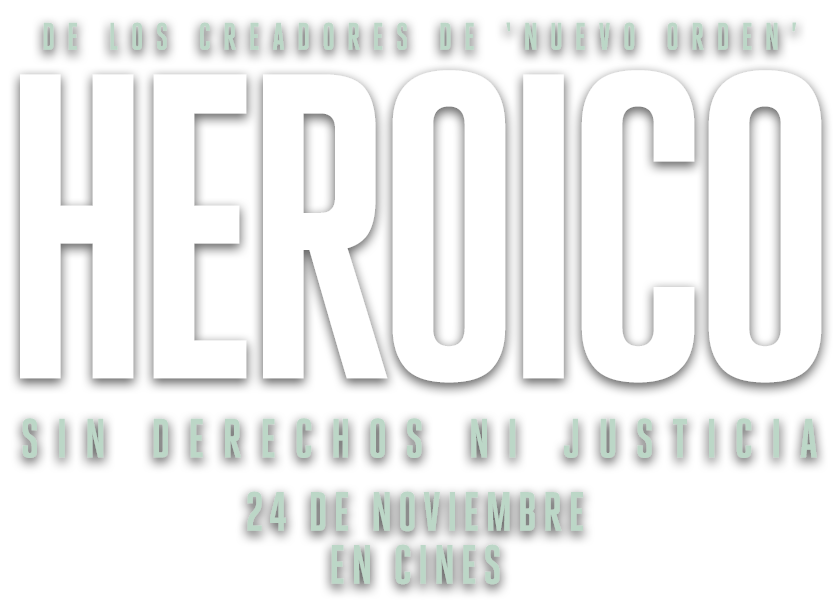
<style>
.page{position:relative;width:840px;height:600px;background:#ffffff}
.page>*{position:absolute;margin:0}
.t1{font:37.7px "HeroicCondensed-Bold";letter-spacing:0.3em;color:#bcd7c7;text-transform:uppercase;font-weight:bold}
.t2{font:433.6px "HeroicCondensed-Bold";letter-spacing:-0.05em;color:#ffffff}
.t3{font:54.7px "HeroicCondensed-Bold";letter-spacing:0.3em;color:#bcd7c7;text-transform:uppercase;font-weight:bold}
.t4{font:54.7px/53px "HeroicCondensed-Bold";letter-spacing:0.08em;color:#bcd7c7;text-transform:uppercase;font-weight:bold}
</style>
<div class="page">
<p class="t1" style="left:43px;top:22px;width:753px;height:28px">de los creadores de ‘nuevo orden’</p>
<p class="t2" style="left:20px;top:70px;width:802px;height:313px">HEROICO</p>
<p class="t3" style="left:22px;top:418px;width:795px;height:40px">SIN DERECHOS NI JUSTICIA</p>
<p class="t4" style="left:247px;top:491px;width:336px;height:94px;text-align:center">24 de noviembre<br>en cines</p>
</div>
